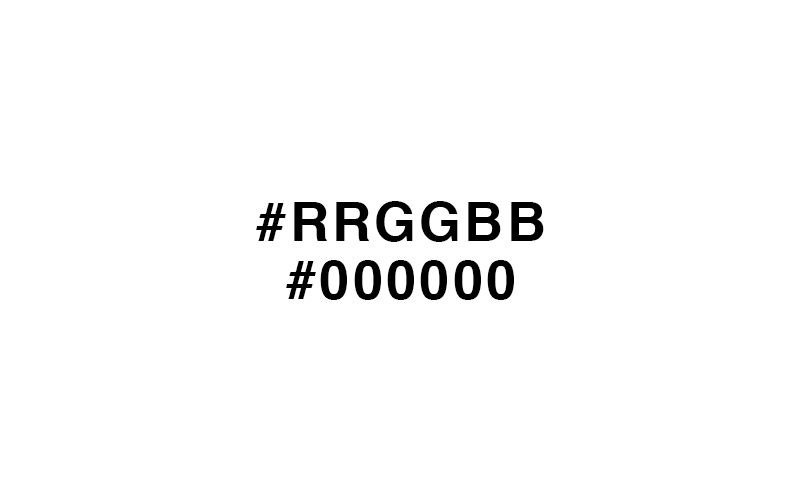
<style>
.page{position:relative;width:800px;height:500px;background:#ffffff}
.page>*{position:absolute;margin:0}
.t1{font:54px "Helvetica-Bold";letter-spacing:0.06em;color:#000000}
</style>
<div class="page">
<p class="t1" style="left:256px;top:201px;width:288px;height:41px">#RRGGBB</p>
<p class="t1" style="left:286px;top:260px;width:228px;height:40px">#000000</p>
</div>
